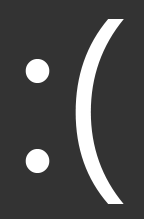
<style>
.page{position:relative;width:144px;height:219px;background:#333333}
.page>*{position:absolute;margin:0}
.t1{font:215px "SegoeUI";letter-spacing:0.005em;color:#ffffff}
</style>
<div class="page">
<p class="t1" style="left:25px;top:19px;width:99px;height:185px">:(</p>
</div>
